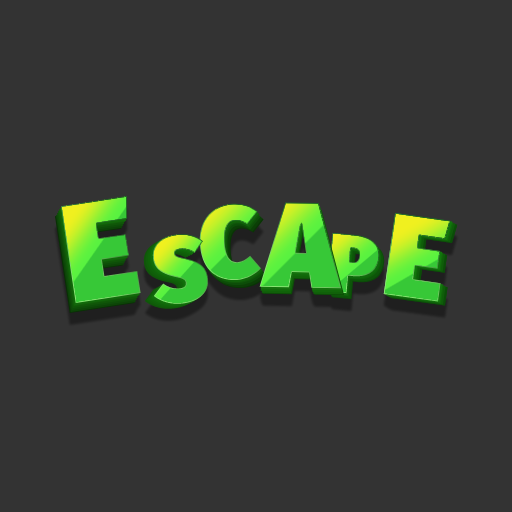
<style>
.page{position:relative;width:512px;height:512px;background:#333333}
.page>*{position:absolute;margin:0}
.t1{font:140.3px "FiraSans-Ultra"}
.t2{font:102.9px "FiraSans-Ultra"}
.t3{font:121.6px "FiraSans-Ultra"}
.t4{font:116.9px "FiraSans-Ultra"}
.t5{font:93.5px "FiraSans-Ultra"}
.t6{font:84.2px "FiraSans-Ultra"}
</style>
<div class="page">
<p class="t1" style="left:60px;top:196px;width:81px;height:108px;rotate:-9deg">E</p>
<p class="t2" style="left:198px;top:203px;width:63px;height:78px;rotate:-3deg">C</p>
<p class="t3" style="left:259px;top:202px;width:83px;height:87px;rotate:1deg">A</p>
<p class="t4" style="left:383px;top:213px;width:68px;height:89px;rotate:8deg">E</p>
<p class="t4" style="left:383px;top:213px;width:68px;height:89px;rotate:8deg">E</p>
<p class="t5" style="left:151px;top:233px;width:59px;height:72px;rotate:-5deg">S</p>
<p class="t6" style="left:327px;top:232px;width:54px;height:62px;rotate:5deg">P</p>
</div>
